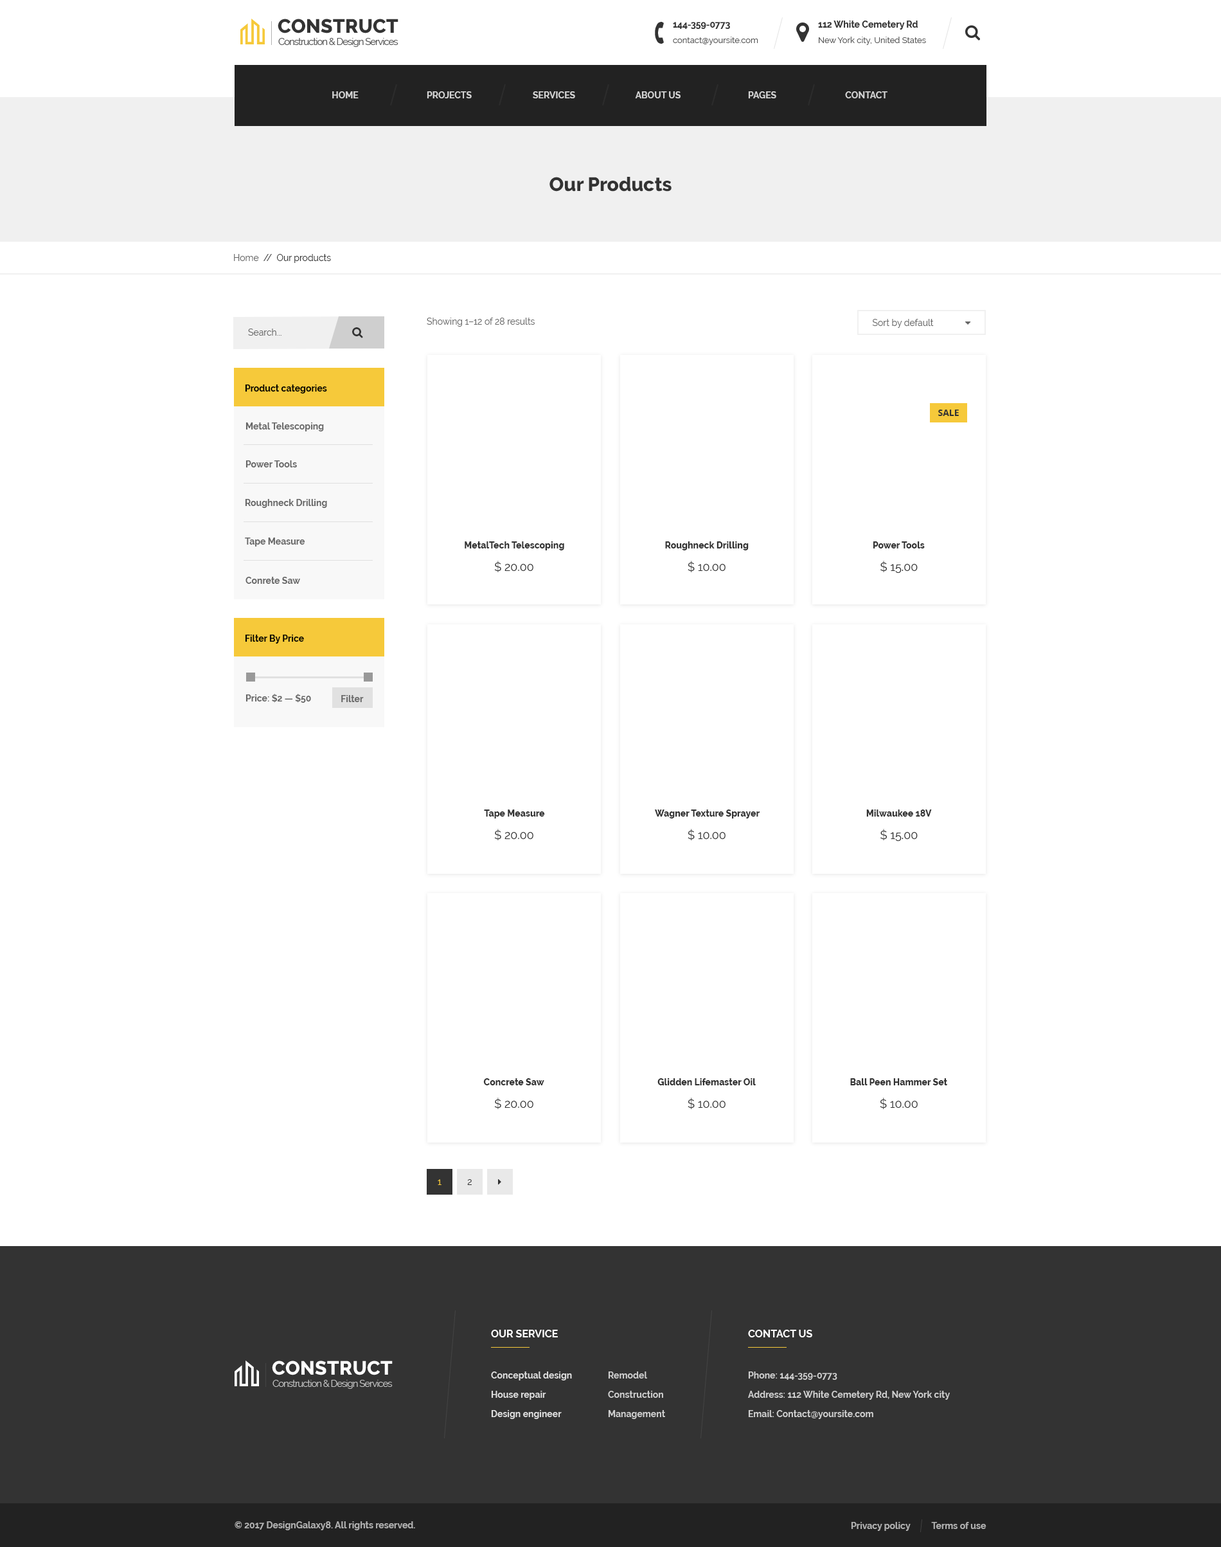
<style>
.page{position:relative;width:1221px;height:1547px;background:#ffffff}
.page>*{position:absolute;margin:0}
.t1{font:19.3px "Raleway-ExtraBold";letter-spacing:0.01em;color:#333333}
.t2{font:9px "Raleway-Bold";color:#333333}
.t3{font:9.6px "Raleway-Regular";letter-spacing:-0.07em;color:#555555}
.t4{font:8.4px "Raleway-Regular";color:#555555}
.t5{font:9px "Raleway-Bold";color:#d4d4d4;text-transform:uppercase}
.t6{font:19.3px "Raleway-ExtraBold";color:#333333}
.t7{font:9px "Raleway-Regular";color:#333333}
.t8{font:9px "Raleway-Regular";color:#666666}
.t9{font:9px "Raleway-Bold";color:#000000}
.t10{font:9px "NotoSans-Bold";color:#333333}
.t11{font:9px "Raleway-Bold";color:#666666}
.t12{font:9px "Raleway-ExtraBold";color:#333333}
.t13{font:11.6px "Raleway-Regular";color:#333333}
.t14{font:9px "Raleway-Regular";color:#f6c93a}
.t15{font:10.3px "Raleway-Bold";color:#ffffff;text-transform:uppercase}
.t16{font:19.3px "Raleway-ExtraBold";letter-spacing:0.01em;color:#ffffff}
.t17{font:9px/19.3px "Raleway-Bold";color:#e1e1e1}
.t18{font:9px/19.3px "Raleway-Bold";color:#d0d0d0}
.t19{font:9.6px "Raleway-Regular";letter-spacing:-0.07em;color:#c5c5c5}
.t20{font:9px "Raleway-Bold";color:#b2b2b2}
</style>
<div class="page">
<p class="t1" style="left:278px;top:19px;width:121px;height:14px">CONSTRUCT</p>
<p class="t2" style="left:673px;top:22px;width:57px;height:7px">144-359-0773</p>
<p class="t2" style="left:818px;top:21px;width:101px;height:9px">112 White Cemetery Rd</p>
<p class="t3" style="left:278px;top:38px;width:121px;height:9px">Construction &amp; Design Services</p>
<p class="t4" style="left:673px;top:37px;width:86px;height:8px">contact@yoursite.com</p>
<p class="t4" style="left:819px;top:37px;width:107px;height:8px">New York city, United States</p>
<p class="t5" style="left:332px;top:91px;width:27px;height:7px">Home</p>
<p class="t5" style="left:427px;top:91px;width:45px;height:7px">Projects</p>
<p class="t5" style="left:533px;top:91px;width:42px;height:7px">Services</p>
<p class="t5" style="left:635px;top:91px;width:46px;height:7px">About Us</p>
<p class="t5" style="left:748px;top:91px;width:29px;height:7px">Pages</p>
<p class="t5" style="left:845px;top:91px;width:43px;height:7px">Contact</p>
<p class="t6" style="left:550px;top:177px;width:122px;height:15px">Our Products</p>
<p class="t7" style="left:234px;top:254px;width:97px;height:9px"><span class="t8">Home</span>  //  Our products</p>
<p class="t8" style="left:427px;top:318px;width:108px;height:9px">Showing 1–12 of 28 results</p>
<p class="t8" style="left:248px;top:328px;width:34px;height:8px">Search...</p>
<p class="t9" style="left:245px;top:384px;width:82px;height:9px">Product categories</p>
<p class="t10" style="left:939px;top:410px;width:20px;height:6px">SALE</p>
<p class="t11" style="left:246px;top:422px;width:78px;height:9px">Metal Telescoping</p>
<p class="t11" style="left:246px;top:460px;width:51px;height:7px">Power Tools</p>
<p class="t11" style="left:245px;top:499px;width:82px;height:9px">Roughneck Drilling</p>
<p class="t11" style="left:245px;top:537px;width:60px;height:9px">Tape Measure</p>
<p class="t12" style="left:465px;top:541px;width:99px;height:9px">MetalTech Telescoping</p>
<p class="t12" style="left:665px;top:541px;width:84px;height:9px">Roughneck Drilling</p>
<p class="t12" style="left:874px;top:541px;width:51px;height:7px">Power Tools</p>
<p class="t13" style="left:494px;top:561px;width:40px;height:11px">$ 20.00</p>
<p class="t13" style="left:688px;top:561px;width:38px;height:11px">$ 10.00</p>
<p class="t13" style="left:881px;top:561px;width:37px;height:12px">$ 15.00</p>
<p class="t11" style="left:246px;top:577px;width:54px;height:7px">Conrete Saw</p>
<p class="t9" style="left:245px;top:634px;width:59px;height:10px">Filter By Price</p>
<p class="t11" style="left:246px;top:694px;width:65px;height:9px">Price: $2 — $50</p>
<p class="t11" style="left:341px;top:695px;width:23px;height:7px">Filter</p>
<p class="t12" style="left:484px;top:809px;width:61px;height:9px">Tape Measure</p>
<p class="t12" style="left:654px;top:809px;width:106px;height:9px">Wagner Texture Sprayer</p>
<p class="t12" style="left:867px;top:809px;width:65px;height:7px">Milwaukee 18V</p>
<p class="t13" style="left:494px;top:829px;width:40px;height:11px">$ 20.00</p>
<p class="t13" style="left:688px;top:829px;width:38px;height:11px">$ 10.00</p>
<p class="t13" style="left:881px;top:829px;width:37px;height:12px">$ 15.00</p>
<p class="t12" style="left:483px;top:1078px;width:61px;height:7px">Concrete Saw</p>
<p class="t12" style="left:658px;top:1078px;width:98px;height:7px">Glidden Lifemaster Oil</p>
<p class="t12" style="left:851px;top:1078px;width:97px;height:7px">Ball Peen Hammer Set</p>
<p class="t13" style="left:494px;top:1097px;width:40px;height:12px">$ 20.00</p>
<p class="t13" style="left:688px;top:1097px;width:38px;height:12px">$ 10.00</p>
<p class="t13" style="left:880px;top:1097px;width:38px;height:12px">$ 10.00</p>
<p class="t14" style="left:438px;top:1179px;width:4px;height:6px">1</p>
<p class="t7" style="left:467px;top:1179px;width:5px;height:6px">2</p>
<p class="t15" style="left:491px;top:1329px;width:67px;height:8px">Our service</p>
<p class="t15" style="left:748px;top:1329px;width:65px;height:8px">ContacT Us</p>
<p class="t16" style="left:272px;top:1360px;width:121px;height:15px">CONSTRUCT</p>
<p class="t17" style="left:491px;top:1371px;width:81px;height:48px">Conceptual design<br>House repair<br>Design engineer</p>
<p class="t18" style="left:608px;top:1371px;width:57px;height:48px">Remodel<br>Construction<br>Management</p>
<p class="t18" style="left:748px;top:1371px;width:202px;height:48px">Phone: 144-359-0773<br>Address: 112 White Cemetery Rd, New York city<br>Email: Contact@yoursite.com</p>
<p class="t19" style="left:273px;top:1380px;width:120px;height:9px">Construction &amp; Design Services</p>
<p class="t20" style="left:235px;top:1521px;width:180px;height:9px">© 2017 DesignGalaxy8. All rights reserved.</p>
<p class="t20" style="left:851px;top:1522px;width:136px;height:9px">Privacy policy          Terms of use</p>
</div>
